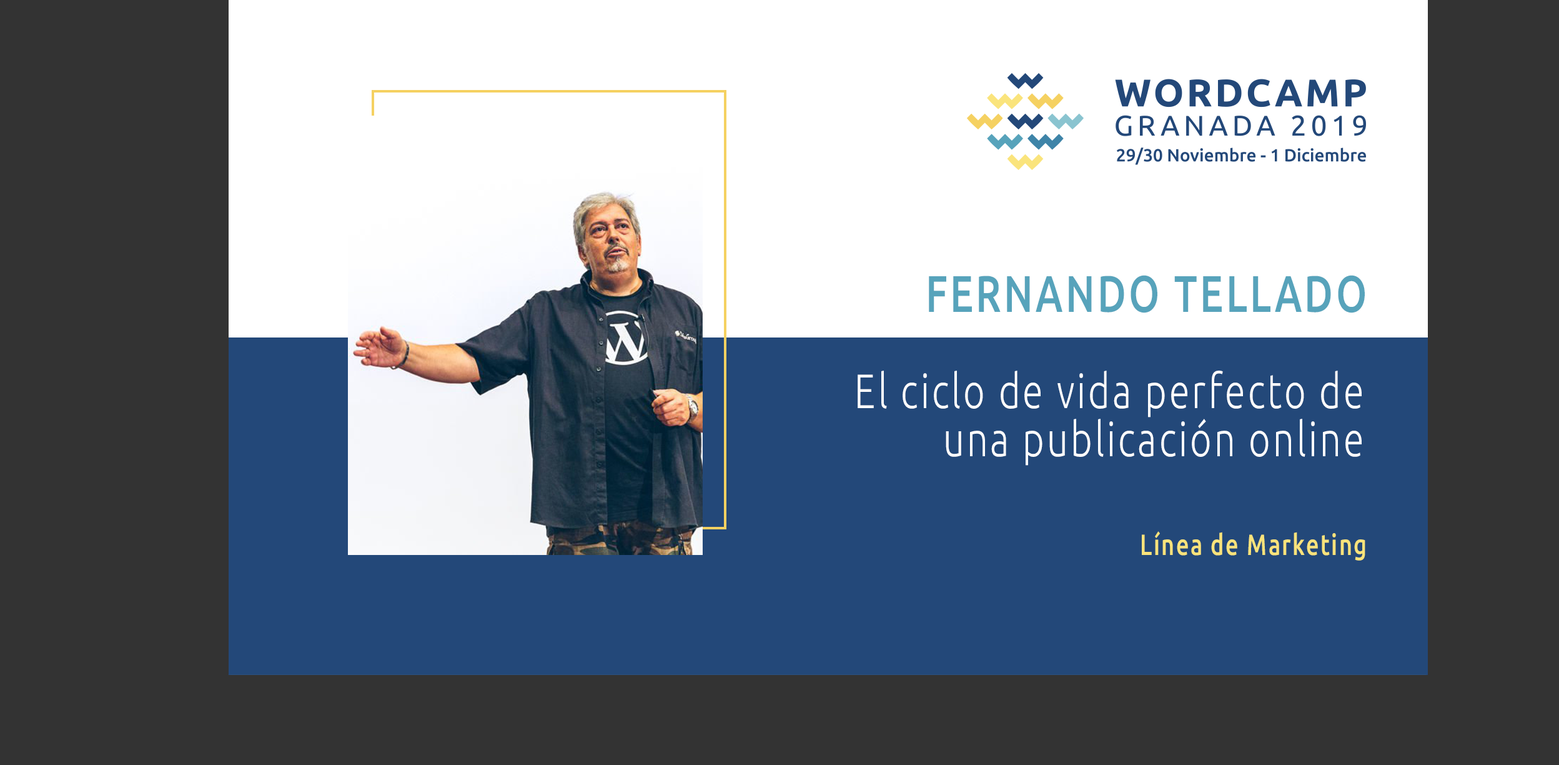
<style>
.page{position:relative;width:1559px;height:765px;background:#333333}
.page>*{position:absolute;margin:0}
.t1{font:51.4px "Ubuntu-Medium";letter-spacing:0.068em;color:#57a3bb;scale:0.77 1}
.t2{font:48.2px/48.2px "Ubuntu-Light";letter-spacing:0.068em;color:#ffffff;scale:0.77 1}
.t3{font:29.2px "Ubuntu-Medium";letter-spacing:0.068em;color:#f9e37b;scale:0.77 1}
</style>
<div class="page">
<p class="t1" style="left:929px;top:275px;width:436px;height:38px">FERNANDO TELLADO</p>
<p class="t2" style="left:858px;top:370px;width:504px;height:95px;text-align:right">El ciclo de vida perfecto de una publicación online</p>
<p class="t3" style="left:1142px;top:531px;width:224px;height:29px">Línea de Marketing</p>
</div>
